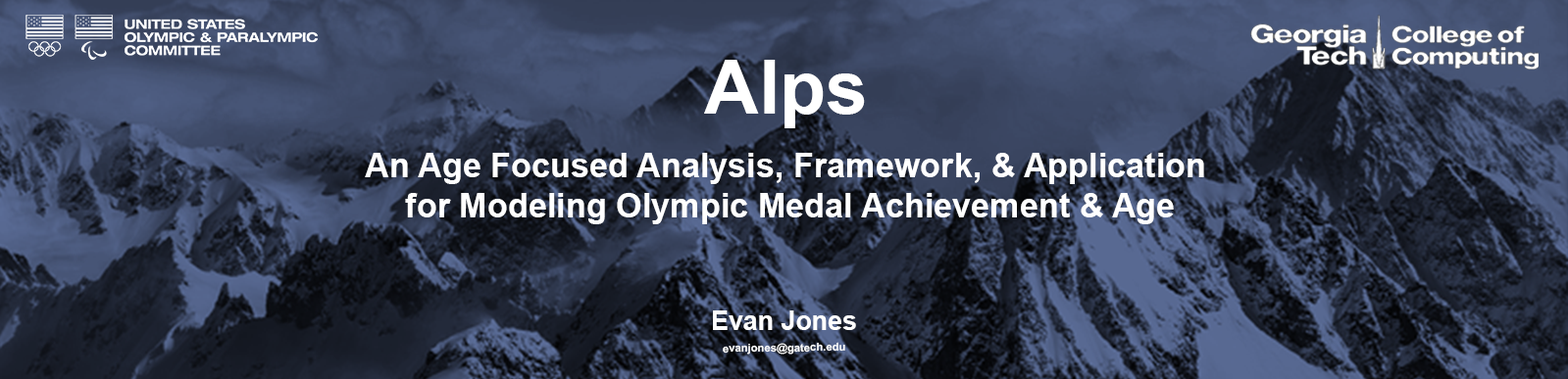
<style>
.page{position:relative;width:1568px;height:379px}
.page>*{position:absolute;margin:0}
.t1{font:75.1px "Arial-BoldMT";color:#ffffff}
.t2{font:33.6px "Arial-BoldMT";color:#ffffff}
.t3{font:26.2px "Arial-BoldMT";color:#ffffff}
.t4{font:11px "Arial-BoldMT";color:#ffffff}
</style>
<div class="page">
<p class="t1" style="left:704px;top:60px;width:161px;height:68px">Alps</p>
<p class="t2" style="left:365px;top:153px;width:839px;height:72px;text-align:center">An Age Focused Analysis, Framework, &amp; Application <br>for Modeling Olympic Medal Achievement &amp; Age</p>
<p class="t3" style="left:713px;top:311px;width:143px;height:19px">Evan Jones</p>
<p class="t4" style="left:723px;top:342px;width:122px;height:13px;rotate:-1deg">evanjones@gatech.edu</p>
</div>
